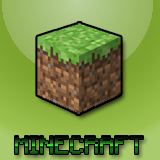
<style>
.page{position:relative;width:160px;height:160px}
.page>*{position:absolute;margin:0}
.t1{font:20px "Minecraft"}
</style>
<div class="page">
<p class="t1" style="left:15px;top:136px;width:128px;height:18px">MINECRAFT</p>
</div>
